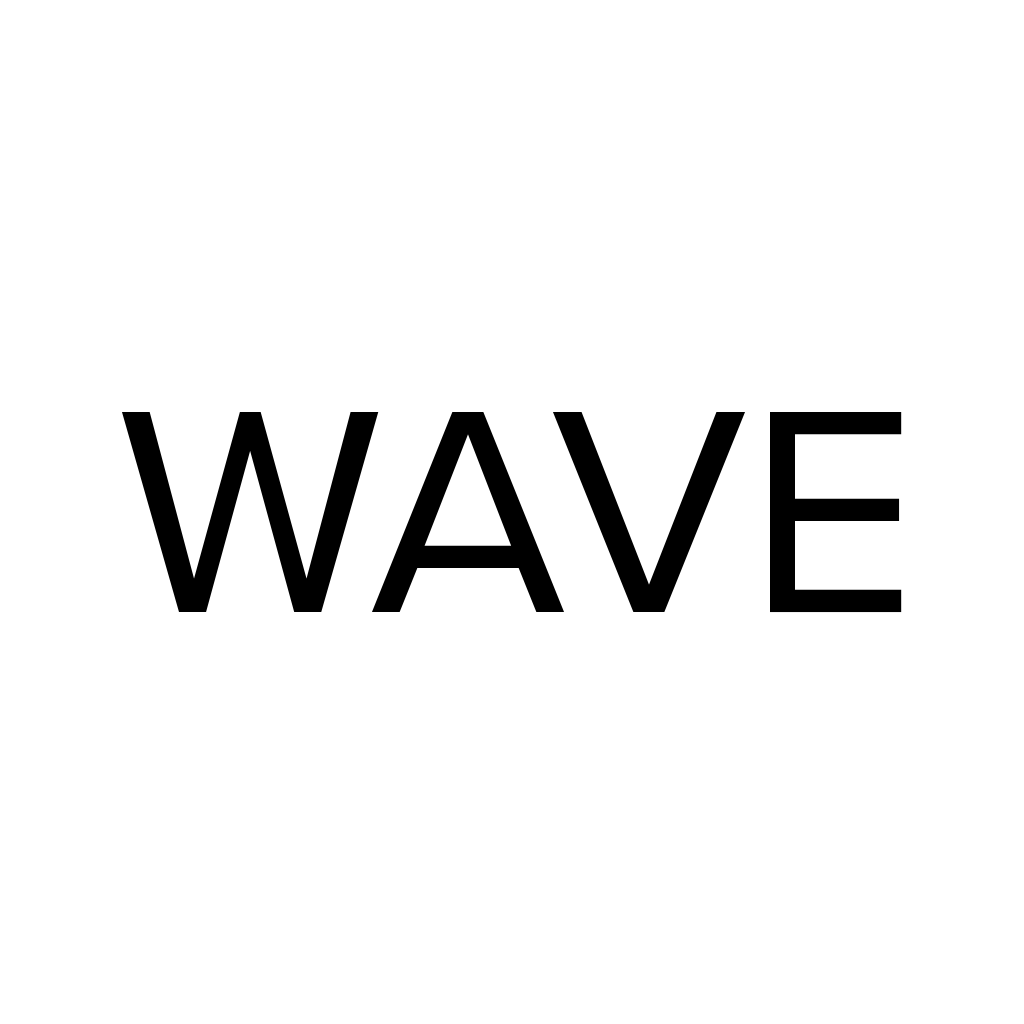
<style>
.page{position:relative;width:1024px;height:1024px;background:#ffffff}
.page>*{position:absolute;margin:0}
.t1{font:300px "ProximaNova-Regular";color:#000000}
</style>
<div class="page">
<p class="t1" style="left:122px;top:412px;width:780px;height:201px">WAVE</p>
</div>
